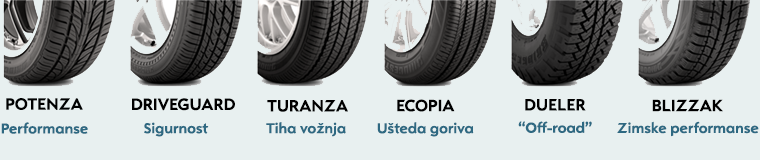
<style>
.page{position:relative;width:760px;height:160px;background:#e8f0f0}
.page>*{position:absolute;margin:0}
.t1{font:17px "OpelSans-Bold";color:#000101}
.t2{font:17px "OpelSans-Bold";color:#000000}
.t3{font:15px "OpelSans-Bold";color:#2e6982}
</style>
<div class="page">
<p class="t1" style="left:6px;top:98px;width:77px;height:12px">POTENZA</p>
<p class="t2" style="left:132px;top:98px;width:103px;height:13px">DRIVEGUARD</p>
<p class="t2" style="left:267px;top:100px;width:81px;height:12px">TURANZA</p>
<p class="t2" style="left:397px;top:99px;width:58px;height:13px">ECOPIA</p>
<p class="t2" style="left:525px;top:99px;width:61px;height:12px">DUELER</p>
<p class="t2" style="left:652px;top:99px;width:71px;height:13px">BLIZZAK</p>
<p class="t3" style="left:1px;top:122px;width:87px;height:12px">Performanse</p>
<p class="t3" style="left:144px;top:122px;width:65px;height:15px">Sigurnost</p>
<p class="t3" style="left:266px;top:122px;width:80px;height:15px">Tiha vožnja</p>
<p class="t3" style="left:377px;top:122px;width:97px;height:15px">Ušteda goriva</p>
<p class="t3" style="left:518px;top:121px;width:74px;height:12px">“Off-road”</p>
<p class="t3" style="left:617px;top:121px;width:142px;height:16px">Zimske performanse</p>
</div>
